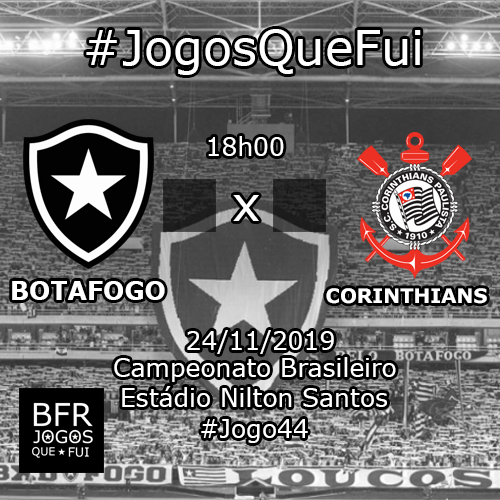
<style>
.page{position:relative;width:500px;height:500px}
.page>*{position:absolute;margin:0}
.t1{font:48px "Verdana";color:#ffffff}
.t2{font:25px "Verdana";color:#ffffff}
.t3{font:25px "Verdana-Bold";color:#ffffff}
.t4{font:20px "Verdana-Bold";color:#ffffff}
</style>
<div class="page">
<p class="t1" style="left:86px;top:29px;width:335px;height:46px">#JogosQueFui</p>
<p class="t2" style="left:208px;top:136px;width:76px;height:20px">18h00</p>
<p class="t1" style="left:233px;top:195px;width:26px;height:26px">x</p>
<p class="t3" style="left:12px;top:281px;width:153px;height:19px">BOTAFOGO</p>
<p class="t4" style="left:326px;top:288px;width:161px;height:16px">CORINTHIANS</p>
<p class="t2" style="left:187px;top:330px;width:147px;height:24px">24/11/2019</p>
<p class="t2" style="left:114px;top:357px;width:282px;height:25px">Campeonato Brasileiro</p>
<p class="t2" style="left:122px;top:386px;width:265px;height:21px">Estádio Nilton Santos</p>
<p class="t2" style="left:201px;top:419px;width:107px;height:24px">#Jogo44</p>
</div>
